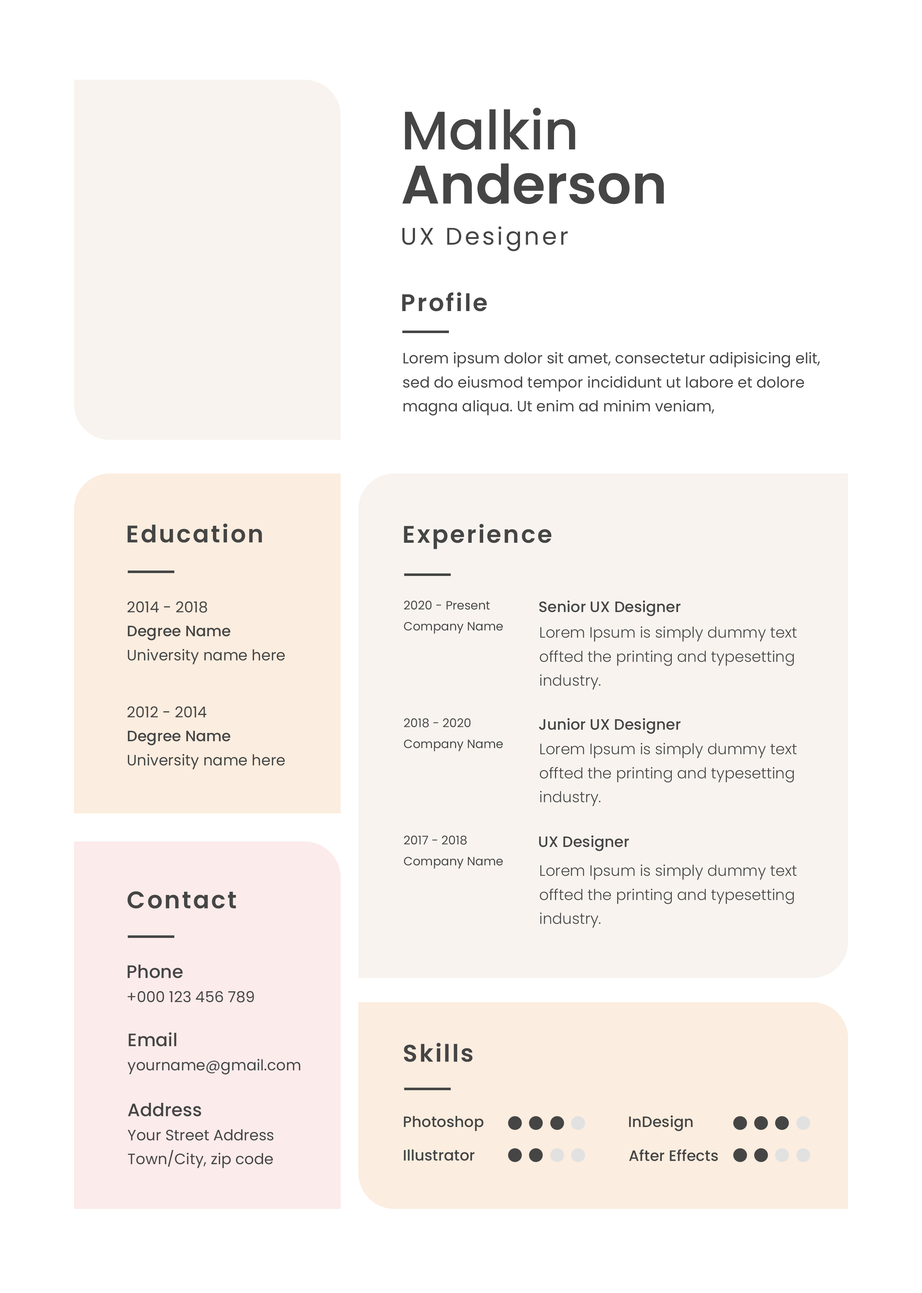
<style>
.page{position:relative;width:922px;height:1293px;background:#ffffff}
.page>*{position:absolute;margin:0}
.t1{font:54.1px/54.1px "Poppins-SemiBold";color:#454545}
.t2{font:54.1px/54.1px "Poppins-Medium";color:#454545}
.t3{font:24.1px "Poppins-Regular";letter-spacing:0.1em;color:#454545}
.t4{font:24.1px "Poppins-SemiBold";letter-spacing:0.075em;color:#454545}
.t5{font:15px/24.1px "Poppins-Regular";color:#454545}
.t6{font:15px/24.1px "Poppins-Medium";color:#454545}
.t7{font:12px/21.1px "Poppins-Regular";color:#454545}
.t8{font:15px "Poppins-Medium";color:#454545}
.t9{font:15px/24.1px "Poppins-Light";color:#454545}
.t10{font:18px/24.1px "Poppins-Medium";color:#454545}
</style>
<div class="page">
<p class="t1" style="left:402px;top:108px;width:262px;height:96px"><span class="t2">Malkin<br></span>Anderson</p>
<p class="t3" style="left:402px;top:226px;width:166px;height:25px">UX Designer</p>
<p class="t4" style="left:402px;top:292px;width:85px;height:19px">Profile</p>
<p class="t5" style="left:403px;top:352px;width:417px;height:64px">Lorem ipsum dolor sit amet, consectetur adipisicing elit, sed do eiusmod tempor incididunt ut labore et dolore magna aliqua. Ut enim ad minim veniam,</p>
<p class="t4" style="left:127px;top:523px;width:135px;height:20px">Education</p>
<p class="t4" style="left:404px;top:524px;width:147px;height:25px">Experience</p>
<p class="t5" style="left:127px;top:601px;width:158px;height:63px">2014 - 2018<br><span class="t6">Degree Name<br></span>University name here</p>
<p class="t7" style="left:404px;top:601px;width:99px;height:33px">2020 - Present<br>Company Name</p>
<p class="t8" style="left:539px;top:601px;width:142px;height:15px">Senior UX Designer</p>
<p class="t9" style="left:540px;top:626px;width:257px;height:64px">Lorem Ipsum is simply dummy text offted the printing and typesetting industry.</p>
<p class="t5" style="left:127px;top:706px;width:158px;height:63px">2012 - 2014<br><span class="t6">Degree Name<br></span>University name here</p>
<p class="t7" style="left:404px;top:718px;width:99px;height:33px">2018 - 2020<br>Company Name</p>
<p class="t8" style="left:539px;top:718px;width:142px;height:16px">Junior UX Designer</p>
<p class="t9" style="left:540px;top:743px;width:257px;height:63px">Lorem Ipsum is simply dummy text offted the printing and typesetting industry.</p>
<p class="t7" style="left:404px;top:836px;width:99px;height:33px">2017 - 2018<br>Company Name</p>
<p class="t8" style="left:539px;top:836px;width:90px;height:15px">UX Designer</p>
<p class="t9" style="left:540px;top:864px;width:257px;height:64px">Lorem Ipsum is simply dummy text offted the printing and typesetting industry.</p>
<p class="t4" style="left:127px;top:891px;width:109px;height:18px">Contact</p>
<p class="t5" style="left:127px;top:965px;width:127px;height:38px;text-align:right"><span class="t10">Phone<br></span>+000 123 456 789</p>
<p class="t5" style="left:127px;top:1032px;width:173px;height:43px;text-align:right"><span class="t10">Email<br></span>yourname@gmail.com</p>
<p class="t4" style="left:404px;top:1043px;width:69px;height:19px">Skills</p>
<p class="t5" style="left:127px;top:1103px;width:147px;height:65px;text-align:right"><span class="t10">Address<br></span>Your Street Address<br>Town/City, zip code</p>
<p class="t8" style="left:404px;top:1116px;width:80px;height:15px">Photoshop</p>
<p class="t8" style="left:629px;top:1116px;width:64px;height:15px">InDesign</p>
<p class="t8" style="left:404px;top:1149px;width:71px;height:12px">Illustrator</p>
<p class="t8" style="left:629px;top:1149px;width:89px;height:12px">After Effects</p>
</div>
